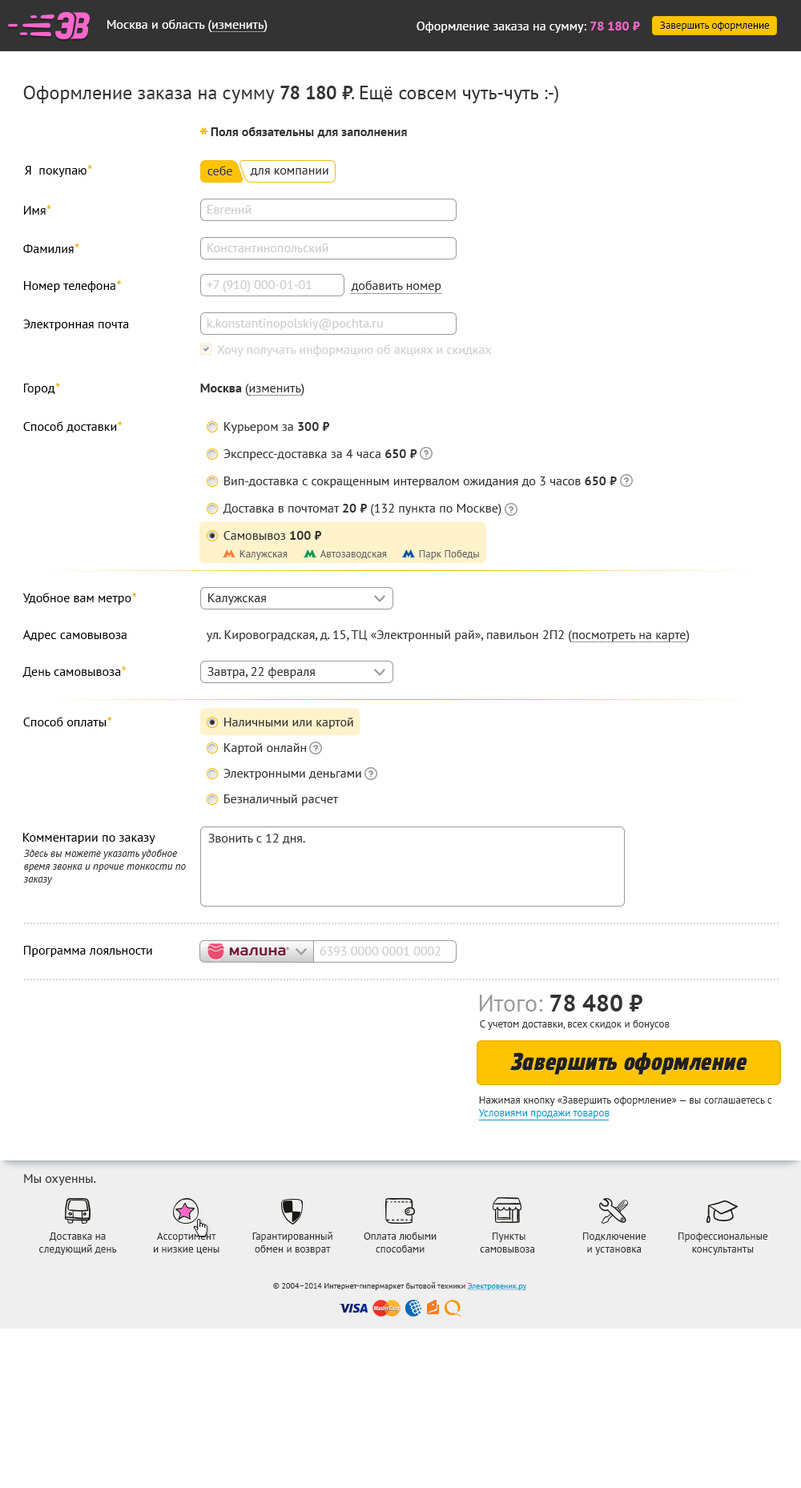
<style>
.page{position:relative;width:801px;height:1488px;background:#ffffff}
.page>*{position:absolute;margin:0}
.t1{font:12.8px "PTSans-Regular";color:#ffffff}
.t2{font:12.8px "PTSans-Bold";color:#ff66cc}
.t3{font:10.4px "PTSans-Regular";color:#000000}
.t4{font:19.2px "PTSans-Regular";color:#333333}
.t5{font:19.2px "PTSans-Bold";color:#333333}
.t6{font:12.8px "PTSans-Bold";color:#333333}
.t7{font:12.8px "PTSans-Regular";color:#000000}
.t8{font:12.8px "PTSans-BoldItalic";color:#efb700}
.t9{font:12.8px "PTSans-Regular";color:#333333}
.t10{font:12.8px "PTSans-Regular";color:#cccccc}
.t11{font:12.8px "PTSans-Regular";color:#d0d0d0}
.t12{font:10.4px "PTSans-Regular";color:#666666}
.t13{font:10.4px/12.8px "PTSans-Italic";color:#333333}
.t14{font:24px "PTSans-Bold";color:#333333}
.t15{font:24px "PTSans-Regular";color:#999999}
.t16{font:10.4px "PTSans-Regular";color:#333333}
.t17{font:24px "EtelkaNarrowMedium-BoldItalic";letter-spacing:0.025em;color:#202020}
.t18{font:10.4px/12.8px "PTSans-Regular";color:#333333}
.t19{font:10.4px/12.8px "PTSans-Regular";color:#0099cc}
.t20{font:10.4px/12.9px "PTSans-Regular";color:#333333}
.t21{font:10.5px/12.9px "PTSans-Regular";color:#333333}
.t22{font:8px "PTSans-Regular";color:#333333}
.t23{font:8px "PTSans-Regular";color:#0099cc;text-decoration:underline}
</style>
<div class="page">
<p class="t1" style="left:107px;top:19px;width:161px;height:13px">Москва и область (изменить)</p>
<p class="t1" style="left:417px;top:22px;width:223px;height:11px">Оформление заказа на сумму: <span class="t2">78 180 ⃏</span></p>
<p class="t3" style="left:660px;top:22px;width:110px;height:9px">Завершить оформление</p>
<p class="t4" style="left:23px;top:86px;width:535px;height:17px">Оформление заказа на сумму <span class="t5">78 180 ⃏</span>. Ещё совсем чуть-чуть :-)</p>
<p class="t6" style="left:211px;top:127px;width:196px;height:11px">Поля обязательны для заполнения</p>
<p class="t7" style="left:25px;top:165px;width:67px;height:12px">Я  покупаю<span class="t8">*</span></p>
<p class="t9" style="left:207px;top:166px;width:25px;height:9px">себе</p>
<p class="t9" style="left:250px;top:168px;width:78px;height:8px">для компании</p>
<p class="t7" style="left:24px;top:205px;width:27px;height:10px">Имя<span class="t8">*</span></p>
<p class="t10" style="left:207px;top:205px;width:45px;height:9px">Евгений</p>
<p class="t7" style="left:23px;top:244px;width:56px;height:9px">Фамилия<span class="t8">*</span></p>
<p class="t10" style="left:207px;top:244px;width:121px;height:8px">Константинопольский</p>
<p class="t7" style="left:24px;top:280px;width:98px;height:12px">Номер телефона<span class="t8">*</span></p>
<p class="t10" style="left:207px;top:280px;width:105px;height:12px">+7 (910) 000-01-01</p>
<p class="t9" style="left:351px;top:280px;width:90px;height:12px">добавить номер</p>
<p class="t7" style="left:23px;top:320px;width:106px;height:11px">Электронная почта</p>
<p class="t10" style="left:207px;top:319px;width:176px;height:11px">k.konstantinopolskiy@pochta.ru</p>
<p class="t11" style="left:217px;top:344px;width:275px;height:12px">Хочу получать информацию об акциях и скидках</p>
<p class="t7" style="left:24px;top:383px;width:36px;height:12px">Город<span class="t8">*</span></p>
<p class="t9" style="left:200px;top:384px;width:104px;height:12px"><span class="t6">Москва </span>(изменить)</p>
<p class="t7" style="left:23px;top:421px;width:100px;height:12px">Способ доставки<span class="t8">*</span></p>
<p class="t9" style="left:224px;top:422px;width:106px;height:11px">Курьером за <span class="t6">300 ⃏</span></p>
<p class="t9" style="left:224px;top:449px;width:193px;height:12px">Экспресс-доставка за 4 часа <span class="t6">650 ⃏</span></p>
<p class="t9" style="left:224px;top:477px;width:393px;height:11px">Вип-доставка с сокращенным интервалом ожидания до 3 часов <span class="t6">650 ⃏</span></p>
<p class="t9" style="left:223px;top:504px;width:278px;height:12px">Доставка в почтомат <span class="t6">20 ⃏ </span>(132 пункта по Москве)</p>
<p class="t9" style="left:224px;top:531px;width:98px;height:9px">Самовывоз <span class="t6">100 ⃏</span></p>
<p class="t12" style="left:240px;top:550px;width:48px;height:10px">Калужская</p>
<p class="t12" style="left:320px;top:550px;width:67px;height:9px">Автозаводская</p>
<p class="t12" style="left:419px;top:550px;width:60px;height:10px">Парк Победы</p>
<p class="t7" style="left:22px;top:593px;width:115px;height:12px">Удобное вам метро<span class="t8">*</span></p>
<p class="t9" style="left:208px;top:594px;width:58px;height:11px">Калужская</p>
<p class="t7" style="left:22px;top:630px;width:105px;height:12px">Адрес самовывоза</p>
<p class="t9" style="left:206px;top:630px;width:484px;height:12px">ул. Кировоградская, д. 15, ТЦ «Электронный рай», павильон 2П2 (посмотреть на карте)</p>
<p class="t7" style="left:22px;top:667px;width:105px;height:11px">День самовывоза<span class="t8">*</span></p>
<p class="t9" style="left:207px;top:667px;width:108px;height:12px">Завтра, 22 февраля</p>
<p class="t7" style="left:23px;top:717px;width:89px;height:10px">Способ оплаты<span class="t8">*</span></p>
<p class="t9" style="left:224px;top:718px;width:129px;height:11px">Наличными или картой</p>
<p class="t9" style="left:224px;top:743px;width:82px;height:12px">Картой онлайн</p>
<p class="t9" style="left:224px;top:769px;width:137px;height:11px">Электронными деньгами</p>
<p class="t9" style="left:224px;top:795px;width:115px;height:11px">Безналичный расчет</p>
<p class="t7" style="left:23px;top:833px;width:132px;height:11px">Комментарии по заказу</p>
<p class="t9" style="left:208px;top:834px;width:97px;height:10px">Звонить с 12 дня.</p>
<p class="t13" style="left:23px;top:850px;width:163px;height:35px">Здесь вы можете указать удобное<br>время звонка и прочие тонкости по<br>заказу</p>
<p class="t7" style="left:24px;top:946px;width:128px;height:11px">Программа лояльности</p>
<p class="t10" style="left:320px;top:947px;width:121px;height:9px">6393 0000 0001 0002</p>
<p class="t14" style="left:480px;top:995px;width:162px;height:17px"><span class="t15">Итого: </span>78 480 ⃏</p>
<p class="t16" style="left:480px;top:1021px;width:190px;height:9px">С учетом доставки, всех скидок и бонусов</p>
<p class="t17" style="left:510px;top:1053px;width:237px;height:22px">Завершить оформление</p>
<p class="t18" style="left:478px;top:1097px;width:294px;height:22px">Нажимая кнопку «Завершить оформление» — вы соглашаетесь с<br><span class="t19">Условиями продажи товаров</span></p>
<p class="t9" style="left:24px;top:1174px;width:72px;height:12px">Мы охуенны.</p>
<p class="t20" style="left:39px;top:1233px;width:78px;height:22px;text-align:center">Доставка на<br>следующий день</p>
<p class="t18" style="left:153px;top:1233px;width:67px;height:22px;text-align:center">Ассортимент<br>и низкие цены</p>
<p class="t20" style="left:252px;top:1232px;width:80px;height:23px;text-align:center">Гарантированный<br>обмен и возврат</p>
<p class="t21" style="left:364px;top:1233px;width:73px;height:20px;text-align:center">Оплата любыми<br>способами</p>
<p class="t18" style="left:480px;top:1233px;width:55px;height:20px;text-align:center">Пункты<br>самовывоза</p>
<p class="t18" style="left:583px;top:1233px;width:63px;height:22px;text-align:center">Подключение<br>и установка</p>
<p class="t20" style="left:679px;top:1233px;width:89px;height:22px;text-align:center">Профессиональные<br>консультанты</p>
<p class="t22" style="left:273px;top:1283px;width:254px;height:8px">© 2004–2014 Интернет-гипермаркет бытовой техники <span class="t23">Электровеник.ру</span></p>
</div>
